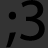
<style>
.page{position:relative;width:48px;height:48px;background:#333333}
.page>*{position:absolute;margin:0}
.t1{font:60px "MyriadPro-Regular";color:#000000}
</style>
<div class="page">
<p class="t1" style="left:6px;top:0px;width:39px;height:48px">;3</p>
</div>
